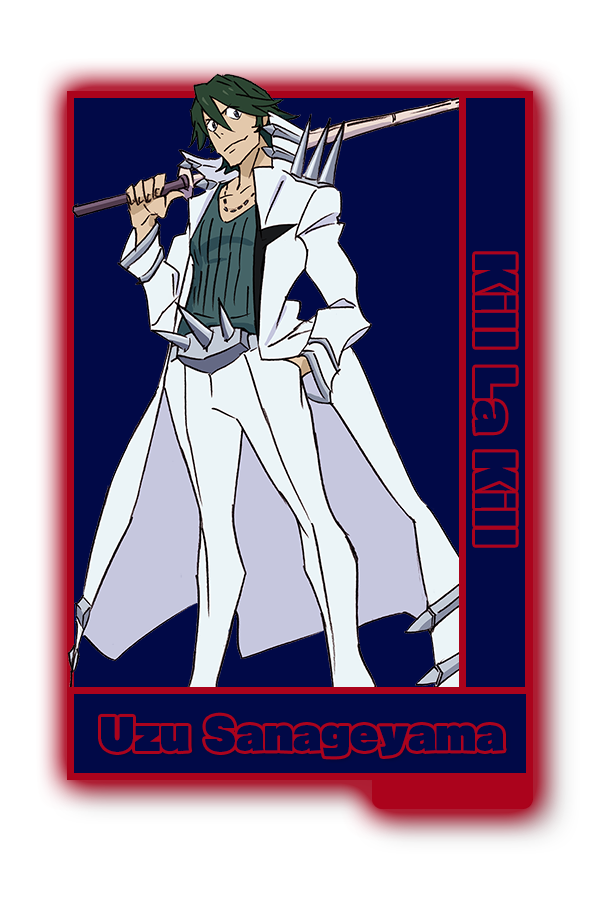
<style>
.page{position:relative;width:600px;height:900px;background:#010947}
.page>*{position:absolute;margin:0}
.t1{font:48.8px "RaglanPunchStd-UB";color:#010947}
.t2{font:40.6px "RaglanPunchStd-UB";color:#010947}
</style>
<div class="page">
<p class="t1" style="left:474px;top:254px;width:42px;height:291px;rotate:90deg">Kill La Kill</p>
<p class="t2" style="left:101px;top:715px;width:403px;height:42px">Uzu Sanageyama</p>
</div>
